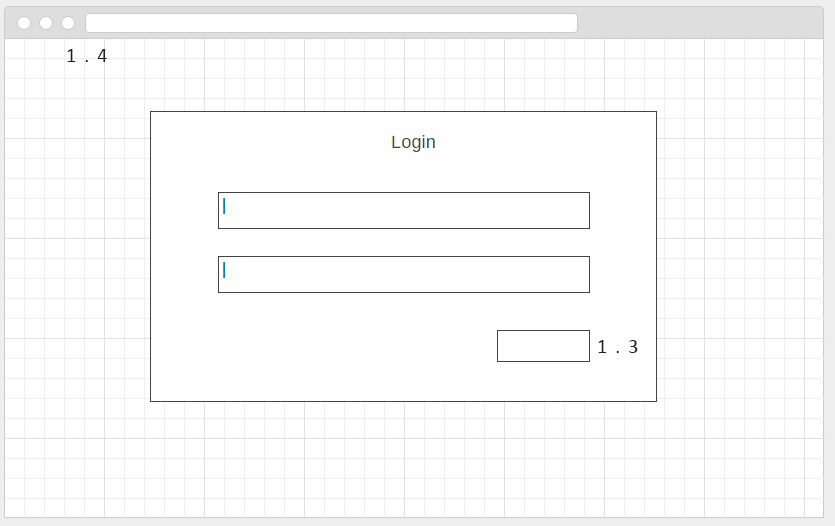
<style>
.page{position:relative;width:835px;height:526px;background:#ffffff}
.page>*{position:absolute;margin:0}
.t1{font:20.1px "Calibri";letter-spacing:0.4em;color:#231f20}
</style>
<div class="page">
<p class="t1" style="left:67px;top:49px;width:40px;height:13px">1.4</p>
<p class="t1" style="left:598px;top:340px;width:40px;height:13px">1.3</p>
</div>
